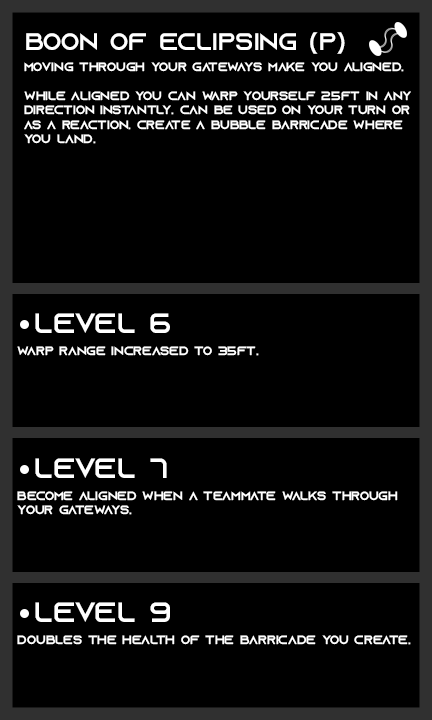
<style>
.page{position:relative;width:432px;height:720px;background:#000000}
.page>*{position:absolute;margin:0}
.t1{font:24px "AzonixRegular";color:#ffffff}
.t2{font:12px "AzonixRegular";color:#ffffff}
.t3{font:28px "AzonixRegular";color:#ffffff}
</style>
<div class="page">
<p class="t1" style="left:26px;top:32px;width:319px;height:22px">boon of eclipsing (p)</p>
<p class="t2" style="left:24px;top:62px;width:387px;height:82px">moving through your gateways make you aligned.<br><br>While aligned you can warp yourself 25ft in any <br>direction instantly. Can be used on your turn or <br>as a reaction. Create a bubble barricade where <br>you land.</p>
<p class="t3" style="left:35px;top:313px;width:135px;height:20px">level 6</p>
<p class="t2" style="left:17px;top:346px;width:242px;height:10px">warp range increased to 35ft.</p>
<p class="t3" style="left:35px;top:458px;width:132px;height:20px">level 7</p>
<p class="t2" style="left:17px;top:491px;width:381px;height:24px">become aligned when a teammate walks through <br>your gateways.</p>
<p class="t3" style="left:35px;top:602px;width:135px;height:20px">level 9</p>
<p class="t2" style="left:17px;top:635px;width:394px;height:10px">doubles the health of the barricade you create.</p>
</div>
